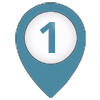
<style>
.page{position:relative;width:100px;height:100px;background:#ffffff}
.page>*{position:absolute;margin:0}
.t1{font:43.9px "OpenSans-Bold";letter-spacing:0.04em;color:#4b88a2}
</style>
<div class="page">
<p class="t1" style="left:39px;top:22px;width:17px;height:31px">1</p>
</div>
